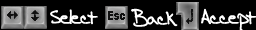
<style>
.page{position:relative;width:256px;height:30px;background:#000000}
.page>*{position:absolute;margin:0}
.t1{font:22px "AEnigmaScrawl4BRK";letter-spacing:-0.06em;color:#ffffff}
</style>
<div class="page">
<p class="t1" style="left:50px;top:9px;width:48px;height:16px">Select</p>
<p class="t1" style="left:131px;top:8px;width:47px;height:19px">Back</p>
<p class="t1" style="left:201px;top:8px;width:56px;height:24px">Accept</p>
</div>
